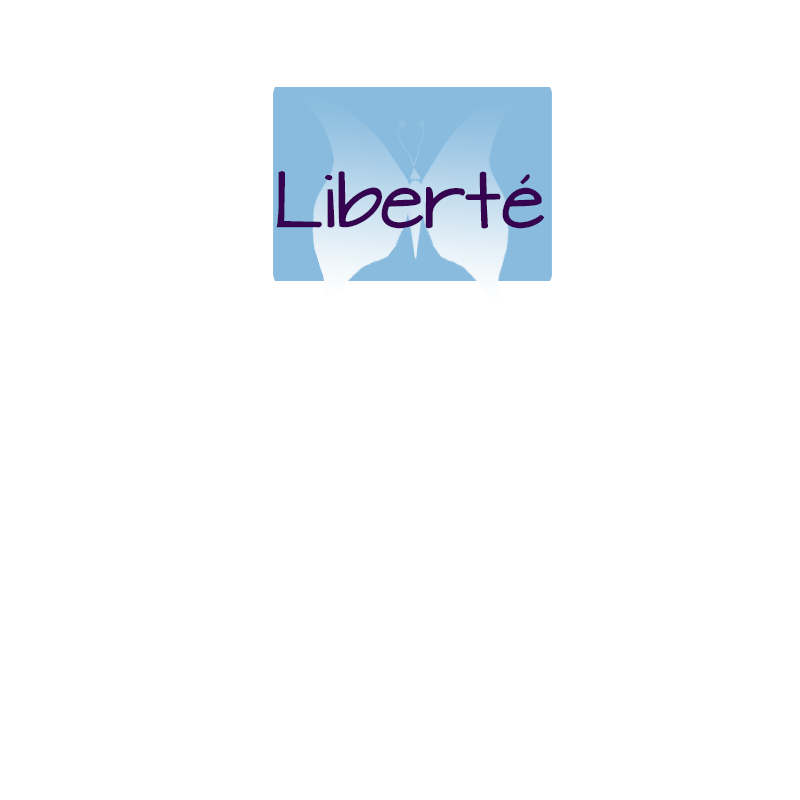
<style>
.page{position:relative;width:800px;height:800px;background:#ffffff}
.page>*{position:absolute;margin:0}
.t1{font:67.8px "ArchitectsDaughter";color:#360350}
</style>
<div class="page">
<p class="t1" style="left:276px;top:171px;width:268px;height:58px">Liberté</p>
</div>
